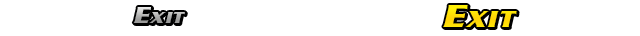
<style>
.page{position:relative;width:640px;height:36px;background:#ffffff}
.page>*{position:absolute;margin:0}
.t1{font:34px "SerpentineICG-BoldOblique";letter-spacing:0.05em;color:#ffdf07;font-variant:small-caps}
.t2{font:24px "SerpentineICG-BoldOblique";letter-spacing:0.05em;font-variant:small-caps}
</style>
<div class="page">
<p class="t1" style="left:443px;top:5px;width:74px;height:22px">Exit</p>
<p class="t2" style="left:133px;top:7px;width:52px;height:16px">Exit</p>
</div>
